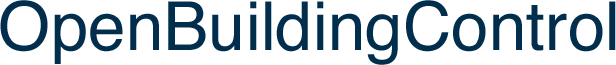
<style>
.page{position:relative;width:616px;height:65px;background:#ffffff}
.page>*{position:absolute;margin:0}
.t1{font:67.4px "Helvetica";color:#022e4d}
</style>
<div class="page">
<p class="t1" style="left:0px;top:0px;width:616px;height:65px">OpenBuildingControl</p>
</div>
